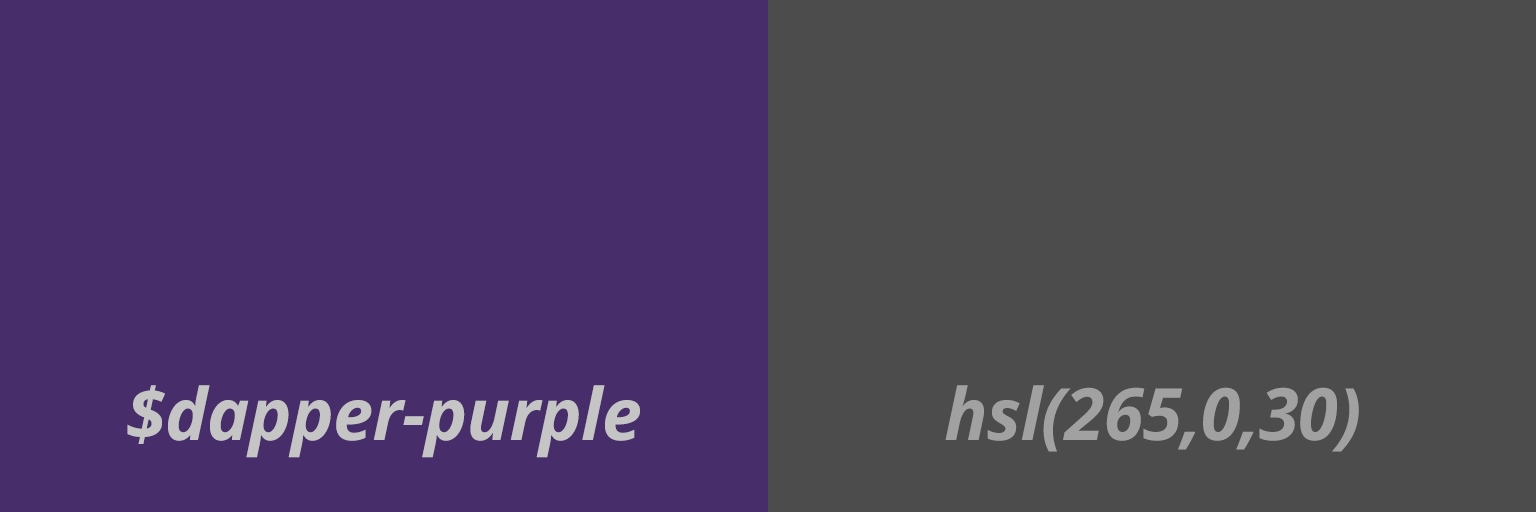
<style>
.page{position:relative;width:1536px;height:512px;background:#472e6b}
.page>*{position:absolute;margin:0}
.t1{font:72px "OpenSans-BoldItalic";letter-spacing:-0.01em;color:#c5c5c5}
.t2{font:72px "OpenSans-BoldItalic";letter-spacing:-0.01em;color:#a1a1a1}
</style>
<div class="page">
<p class="t1" style="left:127px;top:385px;width:513px;height:73px">$dapper-purple</p>
<p class="t2" style="left:945px;top:385px;width:414px;height:67px">hsl(265,0,30)</p>
</div>
